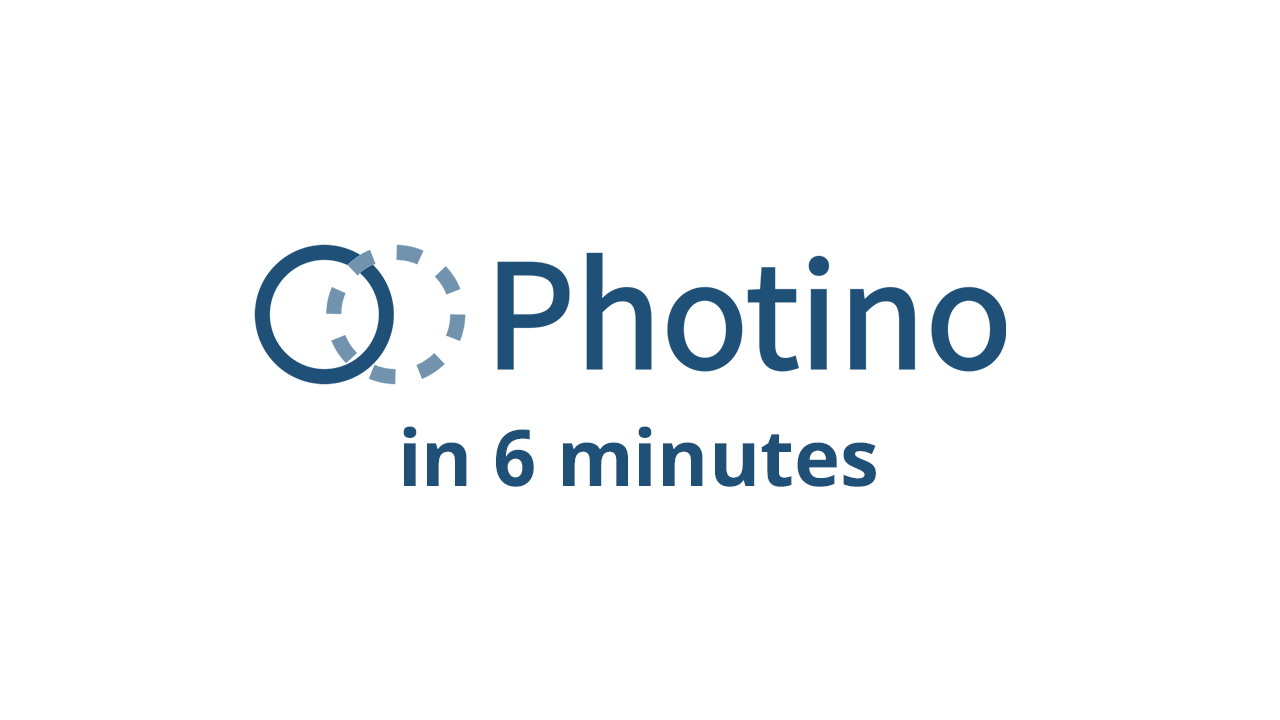
<style>
.page{position:relative;width:1280px;height:720px;background:#ffffff}
.page>*{position:absolute;margin:0}
.t1{font:78.3px "NotoSans-Bold";color:#1e5078}
</style>
<div class="page">
<p class="t1" style="left:403px;top:426px;width:473px;height:61px">in 6 minutes</p>
</div>
